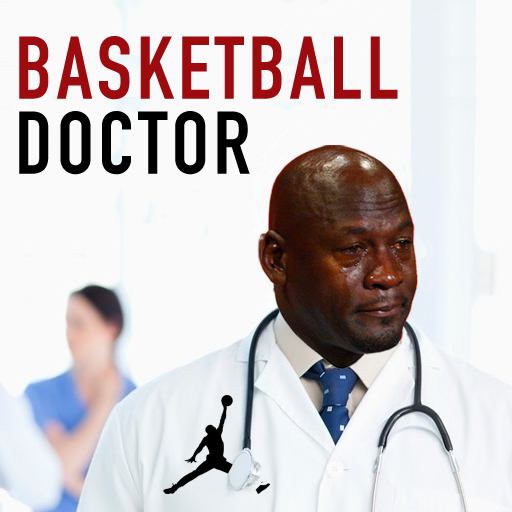
<style>
.page{position:relative;width:512px;height:512px;background:#fafafa}
.page>*{position:absolute;margin:0}
.t1{font:150px/75px "DINCondensed-Bold";letter-spacing:0.05em;color:#9e0b0f}
.t2{font:150px/75px "DINCondensed-Bold";letter-spacing:0.05em;color:#000000}
</style>
<div class="page">
<p class="t1" style="left:19px;top:36px;width:379px;height:139px">BASKETBALL<br><span class="t2">DOCTOR</span></p>
</div>
